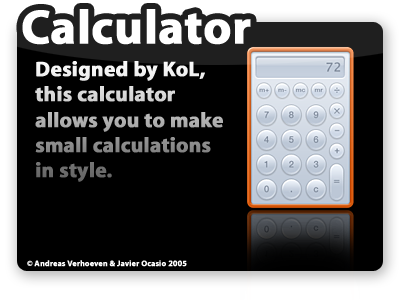
<style>
.page{position:relative;width:400px;height:300px;background:#000000}
.page>*{position:absolute;margin:0}
.t1{font:21px "MyriadBold";font-weight:bold}
.t2{font:8px "MyriadBold";color:#ffffff;font-weight:bold}
</style>
<div class="page">
<p class="t1" style="left:35px;top:61px;width:188px;height:121px">Designed by KoL, this calculator allows you to make small calculations in style.</p>
<p class="t2" style="left:27px;top:260px;width:160px;height:7px">© Andreas Verhoeven &amp; Javier Ocasio 2005</p>
</div>
